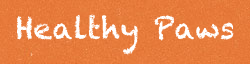
<style>
.page{position:relative;width:250px;height:64px}
.page>*{position:absolute;margin:0}
.t1{font:30px "Chalkduster";color:#ffffff}
</style>
<div class="page">
<p class="t1" style="left:16px;top:14px;width:218px;height:41px">Healthy Paws</p>
</div>
